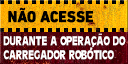
<style>
.page{position:relative;width:128px;height:64px}
.page>*{position:absolute;margin:0}
.t1{font:16px "DINNextLTPro-Heavy";color:#000000;font-weight:bold;scale:0.9 1}
.t2{font:13px/14px "CartesDisplaySSK";color:#ffffff;text-transform:uppercase;scale:0.74 1}
.t3{font:13px "TimesNewRomanPSMT";text-transform:uppercase}
.t4{font:8.5px "CartesDisplaySSK";color:#ffffff;text-transform:uppercase;scale:1.46 1}
.t5{font:13px "CartesDisplaySSK";color:#ffffff;text-transform:uppercase;scale:0.74 1}
</style>
<div class="page">
<p class="t1" style="left:8px;top:7px;width:85px;height:16px">NÃO ACESSE</p>
<p class="t2" style="left:3px;top:36px;width:123px;height:24px">Durante a operacao do<br>carregador robOtico</p>
<p class="t3" style="left:98px;top:33px;width:4px;height:2px">-</p>
<p class="t4" style="left:90px;top:47px;width:3px;height:3px">,</p>
<p class="t5" style="left:92px;top:43px;width:2px;height:4px">,</p>
</div>
